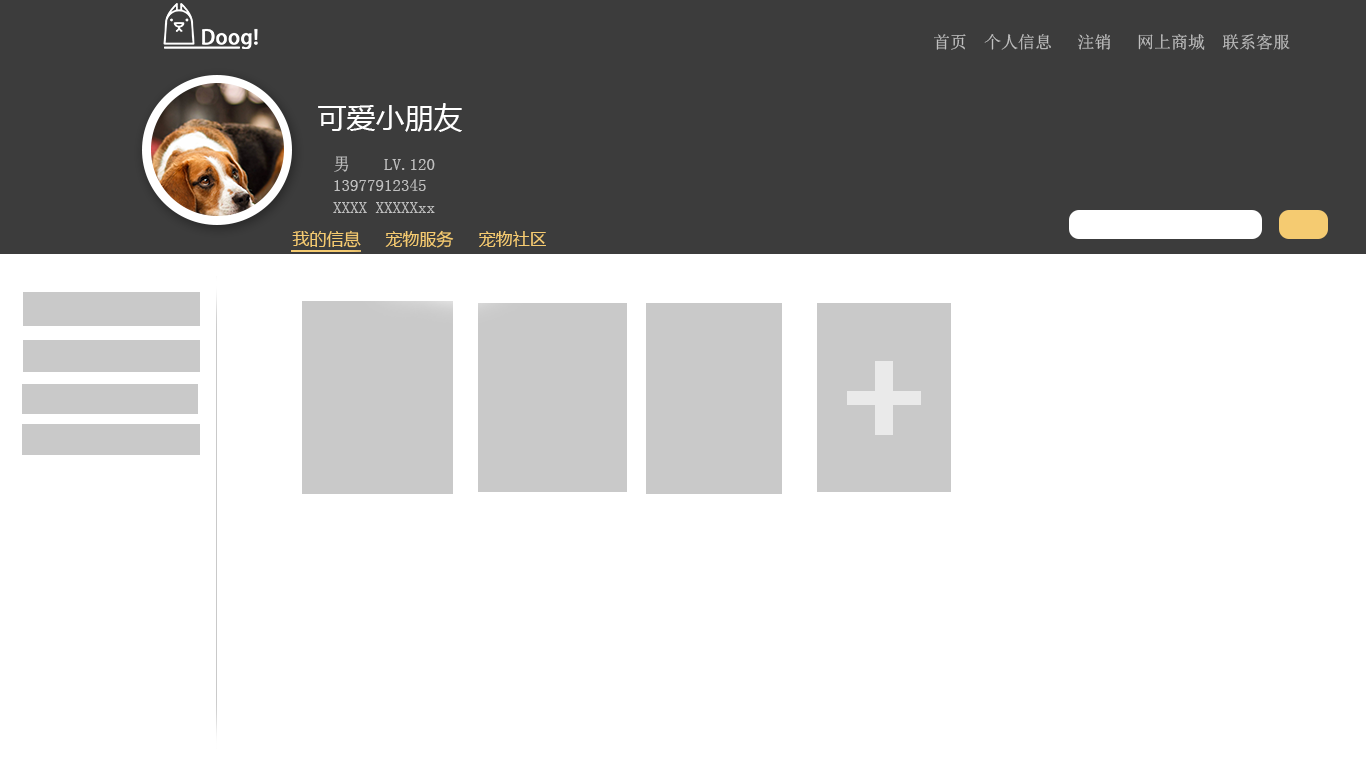
<style>
.page{position:relative;width:1366px;height:768px;background:#ffffff}
.page>*{position:absolute;margin:0}
.t1{font:17px "SimSun";color:#c0c0c0}
.t2{font:29px "MicrosoftYaHei";color:#ffffff}
.t3{font:17px/22px "SimSun";color:#c0c0c0}
.t4{font:17px "MicrosoftYaHei";color:#f5cb71}
</style>
<div class="page">
<p class="t1" style="left:934px;top:34px;width:356px;height:16px">首页  个人信息   注销   网上商城  联系客服</p>
<p class="t2" style="left:318px;top:103px;width:144px;height:29px">可爱小朋友</p>
<p class="t3" style="left:333px;top:156px;width:102px;height:57px">男    LV.120<br>13977912345<br>XXXX XXXXXxx</p>
<p class="t4" style="left:292px;top:230px;width:254px;height:18px">我的信息     宠物服务     宠物社区</p>
</div>
